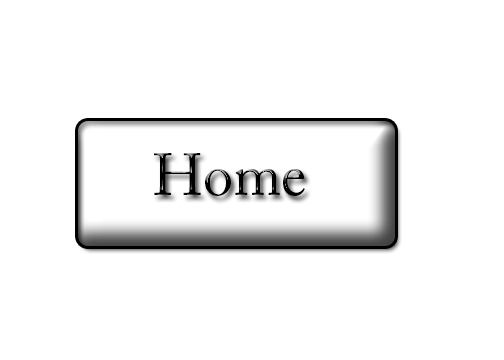
<style>
.page{position:relative;width:504px;height:360px;background:#ffffff}
.page>*{position:absolute;margin:0}
.t1{font:60px "ACaslonPro-Regular";color:#000000}
</style>
<div class="page">
<p class="t1" style="left:154px;top:153px;width:151px;height:43px">Home</p>
</div>
